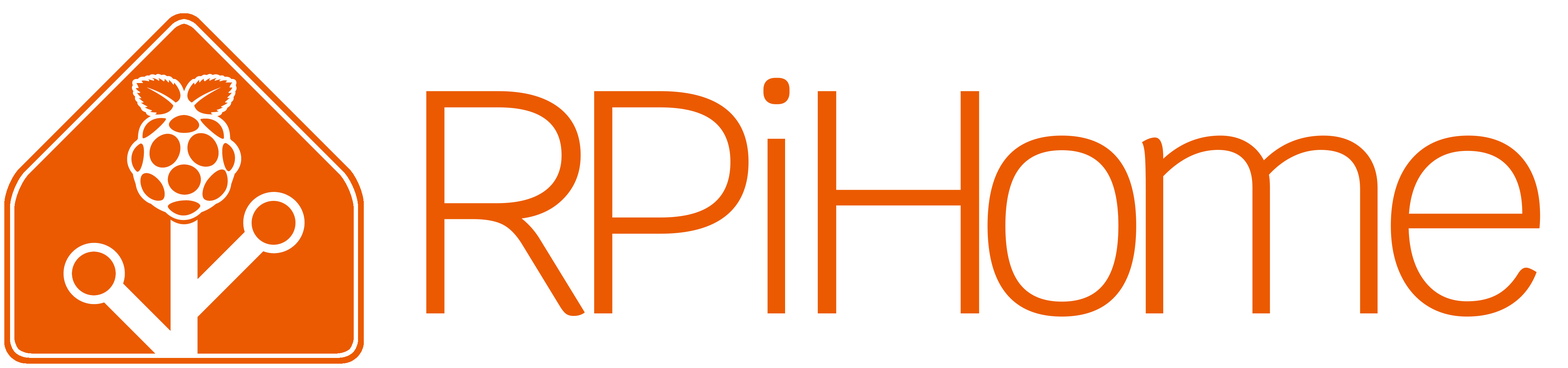
<style>
.page{position:relative;width:1568px;height:368px;background:#ffffff}
.page>*{position:absolute;margin:0}
.t1{font:317.5px "Krub-Light";letter-spacing:-0.1em;color:#eb5a00}
</style>
<div class="page">
<p class="t1" style="left:426px;top:78px;width:1114px;height:239px">RPiHome</p>
</div>
